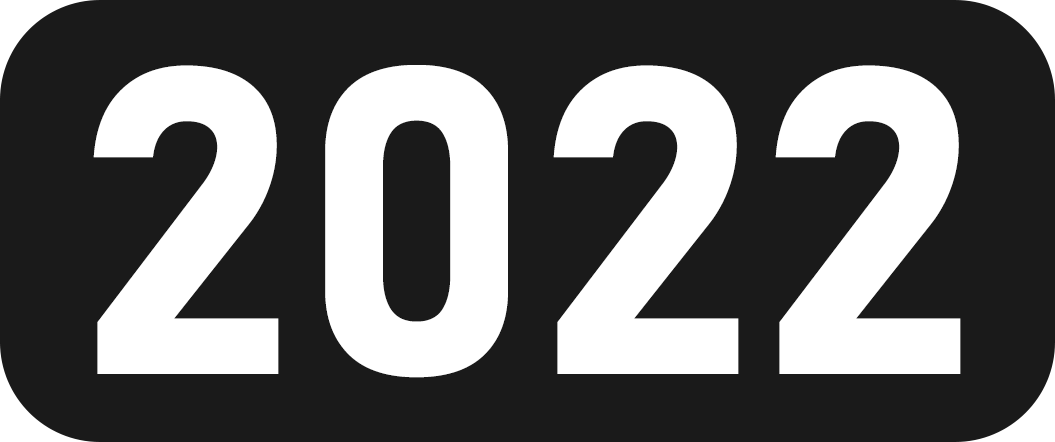
<style>
.page{position:relative;width:1055px;height:442px;background:#1a1a1a}
.page>*{position:absolute;margin:0}
.t1{font:429.9px "Bahnschrift-Bold";color:#ffffff}
</style>
<div class="page">
<p class="t1" style="left:93px;top:65px;width:868px;height:313px">2022</p>
</div>
